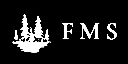
<style>
.page{position:relative;width:128px;height:64px;background:#000000}
.page>*{position:absolute;margin:0}
.t1{font:25px "Cormorant-SemiBold";letter-spacing:0.2em;color:#ffffff;font-variant:small-caps}
</style>
<div class="page">
<p class="t1" style="left:61px;top:23px;width:56px;height:17px">FMS</p>
</div>
